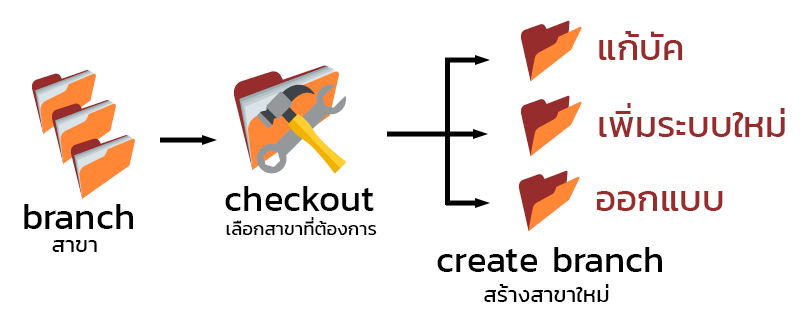
<style>
.page{position:relative;width:812px;height:325px;background:#ffffff}
.page>*{position:absolute;margin:0}
.t1{font:36.3px "Kanit-Regular";color:#962c2c}
.t2{font:36.4px "Kanit-Regular";color:#000000}
.t3{font:36.3px "Kanit-Regular";color:#000000}
.t4{font:18.6px "Kanit-Regular";color:#000000}
.t5{font:22.3px "Kanit-Regular";color:#000000}
.t6{font:22.1px "Kanit-Regular";color:#000000}
</style>
<div class="page">
<p class="t1" style="left:599px;top:31px;width:84px;height:29px">แก้บัค</p>
<p class="t1" style="left:599px;top:103px;width:186px;height:34px">เพิ่มระบบใหม่</p>
<p class="t2" style="left:225px;top:186px;width:149px;height:25px">checkout</p>
<p class="t1" style="left:596px;top:191px;width:127px;height:20px">ออกแบบ</p>
<p class="t3" style="left:24px;top:204px;width:109px;height:25px">branch</p>
<p class="t4" style="left:226px;top:217px;width:151px;height:18px">เลือกสาขาที่ต้องการ</p>
<p class="t5" style="left:52px;top:240px;width:45px;height:12px">สาขา</p>
<p class="t3" style="left:437px;top:247px;width:225px;height:25px">create branch</p>
<p class="t6" style="left:484px;top:284px;width:125px;height:18px">สร้างสาขาใหม่</p>
</div>
